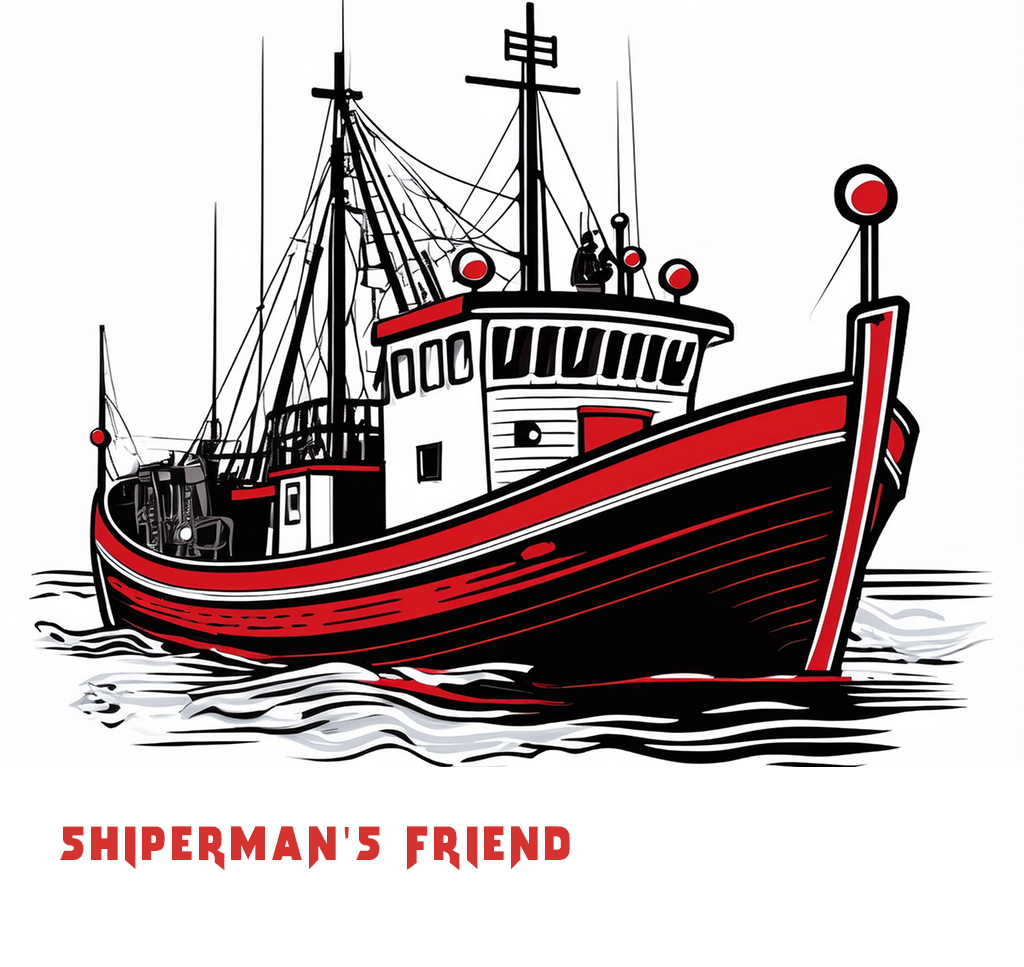
<style>
.page{position:relative;width:1024px;height:967px;background:#ffffff}
.page>*{position:absolute;margin:0}
.t1{font:48px "Arwing";letter-spacing:0.1em;color:#d6332f}
.t2{font:48px "MyriadPro-Regular";letter-spacing:0.1em;color:#d6332f}
</style>
<div class="page">
<p class="t1" style="left:60px;top:826px;width:510px;height:45px">Shiperman<span class="t2">'</span>S Friend</p>
</div>
